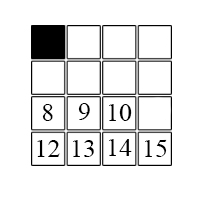
<style>
.page{position:relative;width:200px;height:200px;background:#ffffff}
.page>*{position:absolute;margin:0}
.t1{font:25px "TimesNewRomanPSMT";color:#000000}
.t2{font:24.9px "TimesNewRomanPSMT";color:#000000}
.t3{font:24.6px "TimesNewRomanPSMT";color:#000000;scale:1.06 1}
</style>
<div class="page">
<p class="t1" style="left:42px;top:104px;width:11px;height:17px">8</p>
<p class="t2" style="left:78px;top:103px;width:12px;height:17px">9</p>
<p class="t3" style="left:109px;top:104px;width:23px;height:17px">10</p>
<p class="t3" style="left:37px;top:140px;width:23px;height:17px">12</p>
<p class="t3" style="left:73px;top:140px;width:21px;height:17px">13</p>
<p class="t3" style="left:109px;top:139px;width:23px;height:17px">14</p>
<p class="t3" style="left:145px;top:140px;width:22px;height:17px">15</p>
</div>
